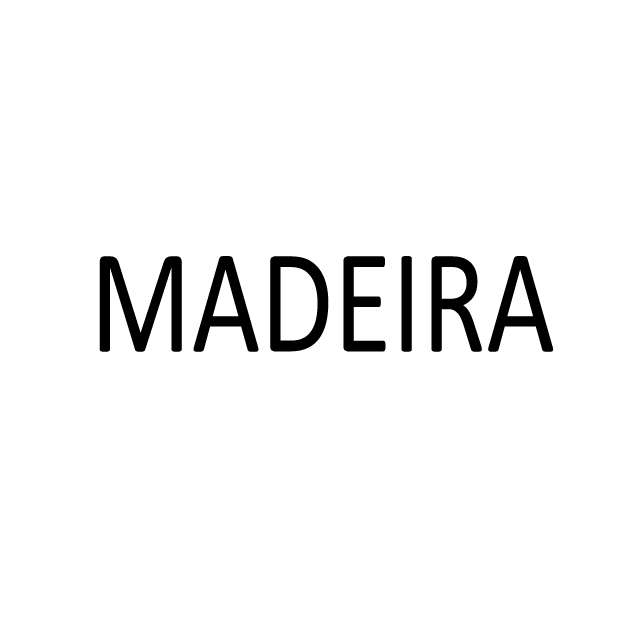
<style>
.page{position:relative;width:640px;height:640px;background:#ffffff}
.page>*{position:absolute;margin:0}
.t1{font:150px "Calibri";color:#000000;scale:0.79 1}
</style>
<div class="page">
<p class="t1" style="left:99px;top:256px;width:455px;height:96px">MADEIRA</p>
</div>
